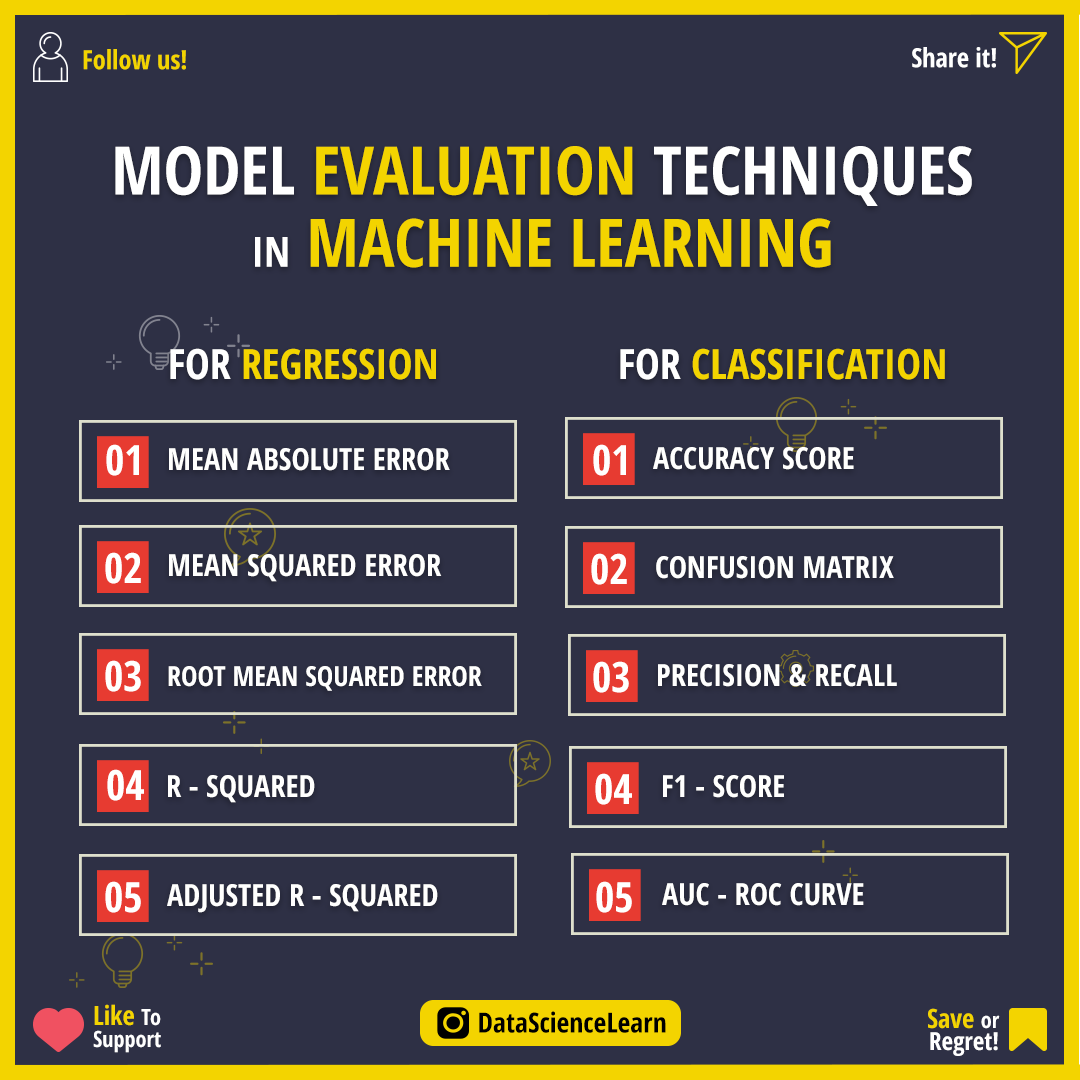
<style>
.page{position:relative;width:1080px;height:1080px;background:#2e3045}
.page>*{position:absolute;margin:0}
.t1{font:26.4px "OpenSans-CondensedBold";color:#f3d400}
.t2{font:26.4px "OpenSans-CondensedBold";color:#ffffff}
.t3{font:66.7px/72.2px "OpenSans-CondensedBold";color:#f3d400}
.t4{font:66.7px/72.2px "OpenSans-CondensedBold";color:#ffffff}
.t5{font:41.7px/72.2px "OpenSans-CondensedBold";color:#ffffff}
.t6{font:41.7px "OpenSans-CondensedBold";color:#f3d400}
.t7{font:41.7px "OpenSans-CondensedBold";color:#ffffff}
.t8{font:41.7px "OpenSans-CondensedBold";color:#fffffe}
.t9{font:30.6px "OpenSans-CondensedBold";color:#fffffe}
.t10{font:27.8px "OpenSans-CondensedBold";color:#fffffe}
.t11{font:22.2px/22.2px "OpenSans-CondensedBold";color:#ffffff}
.t12{font:26.4px/22.2px "OpenSans-CondensedBold";color:#f3d400}
.t13{font:27.8px "OpenSans-CondensedBold";color:#000000}
.t14{font:25px/22.2px "OpenSans-CondensedBold";color:#ffffff}
</style>
<div class="page">
<p class="t1" style="left:83px;top:49px;width:103px;height:21px">Follow us!</p>
<p class="t2" style="left:912px;top:47px;width:84px;height:21px">Share it!</p>
<p class="t3" style="left:115px;top:146px;width:857px;height:122px;text-align:center"><span class="t4">MODEL </span>EVALUATION <span class="t4">TECHNIQUES<br></span><span class="t5">IN</span> MACHINE LEARNING</p>
<p class="t6" style="left:170px;top:348px;width:266px;height:32px"><span class="t7">FOR </span>REGRESSION</p>
<p class="t6" style="left:620px;top:348px;width:325px;height:32px"><span class="t7">FOR </span>CLASSIFICATION</p>
<p class="t8" style="left:106px;top:444px;width:33px;height:32px">01</p>
<p class="t9" style="left:169px;top:448px;width:281px;height:23px">MEAN ABSOLUTE ERROR</p>
<p class="t8" style="left:593px;top:444px;width:33px;height:32px">01</p>
<p class="t9" style="left:653px;top:447px;width:201px;height:23px">ACCURACY SCORE</p>
<p class="t8" style="left:105px;top:552px;width:36px;height:32px">02</p>
<p class="t9" style="left:169px;top:554px;width:273px;height:28px">MEAN SQUARED ERROR</p>
<p class="t8" style="left:591px;top:553px;width:36px;height:32px">02</p>
<p class="t9" style="left:656px;top:556px;width:238px;height:23px">CONFUSION MATRIX</p>
<p class="t8" style="left:105px;top:660px;width:36px;height:32px">03</p>
<p class="t8" style="left:593px;top:661px;width:36px;height:32px">03</p>
<p class="t9" style="left:658px;top:664px;width:239px;height:23px">PRECISION &amp; RECALL</p>
<p class="t10" style="left:168px;top:666px;width:314px;height:25px">ROOT MEAN SQUARED ERROR</p>
<p class="t8" style="left:107px;top:769px;width:37px;height:32px">04</p>
<p class="t8" style="left:595px;top:773px;width:37px;height:32px">04</p>
<p class="t9" style="left:168px;top:775px;width:147px;height:28px">R - SQUARED</p>
<p class="t9" style="left:663px;top:775px;width:121px;height:23px">F1 - SCORE</p>
<p class="t8" style="left:105px;top:881px;width:36px;height:32px">05</p>
<p class="t8" style="left:596px;top:881px;width:36px;height:32px">05</p>
<p class="t9" style="left:167px;top:884px;width:271px;height:29px">ADJUSTED R - SQUARED</p>
<p class="t9" style="left:662px;top:883px;width:202px;height:23px">AUC - ROC CURVE</p>
<p class="t11" style="left:93px;top:1004px;width:68px;height:49px"><span class="t12">Like </span>To<br>Support</p>
<p class="t13" style="left:479px;top:1011px;width:187px;height:22px">DataScienceLearn</p>
<p class="t14" style="left:928px;top:1008px;width:72px;height:48px;text-align:right"><span class="t12">Save </span><span class="t11">or<br></span>Regret!</p>
</div>
